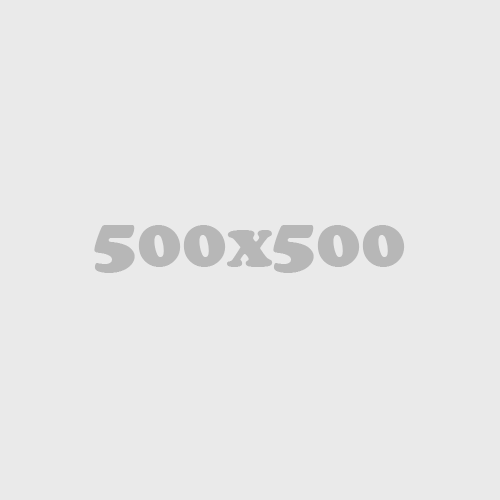
<style>
.page{position:relative;width:500px;height:500px;background:#eaeaea}
.page>*{position:absolute;margin:0}
.t1{font:74.3px "CooperBlack";color:#b7b7b7}
</style>
<div class="page">
<p class="t1" style="left:94px;top:225px;width:311px;height:48px">500x500</p>
</div>
